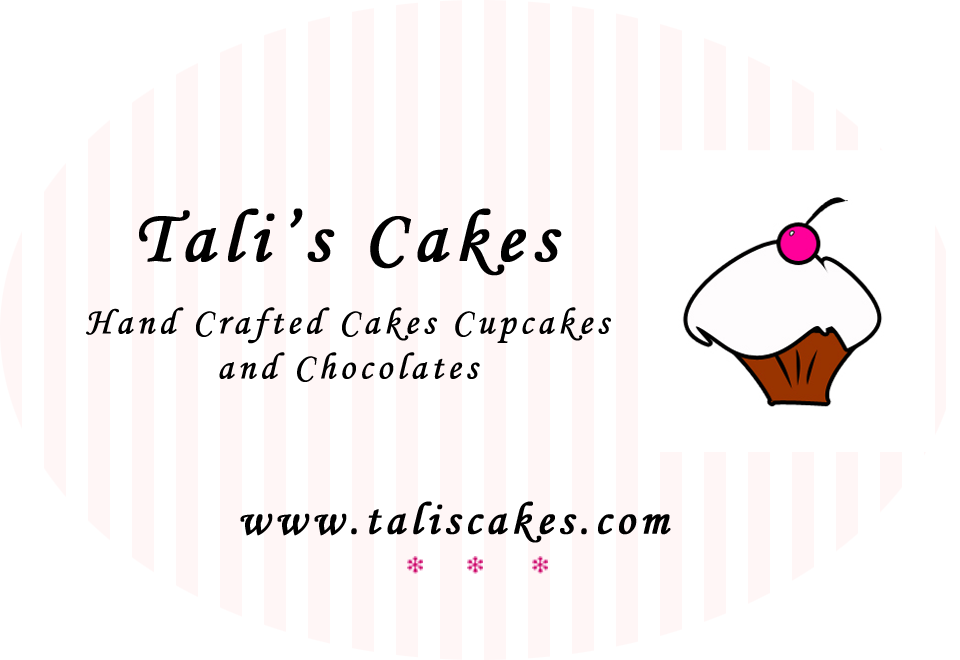
<style>
.page{position:relative;width:960px;height:660px;background:#ffffff}
.page>*{position:absolute;margin:0}
.t1{font:75px "MonotypeCorsiva";letter-spacing:0.1em;color:#000000;font-weight:bold}
.t2{font:37.5px "MonotypeCorsiva";letter-spacing:0.1em;color:#000000;font-weight:bold}
.t3{font:45.8px "MonotypeCorsiva";letter-spacing:0.1em;color:#000000;font-weight:bold}
</style>
<div class="page">
<p class="t1" style="left:139px;top:208px;width:423px;height:68px">Tali’s Cakes</p>
<p class="t2" style="left:86px;top:307px;width:525px;height:75px;text-align:center">Hand Crafted Cakes Cupcakes and Chocolates</p>
<p class="t3" style="left:240px;top:501px;width:431px;height:42px">www.taliscakes.com</p>
</div>
